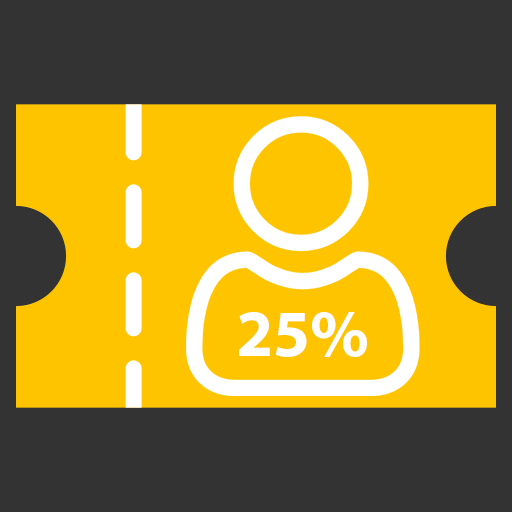
<style>
.page{position:relative;width:512px;height:512px;background:#333333}
.page>*{position:absolute;margin:0}
.t1{font:66.7px "MyriadPro-Bold";color:#ffffff}
</style>
<div class="page">
<p class="t1" style="left:239px;top:312px;width:128px;height:45px">25%</p>
</div>
